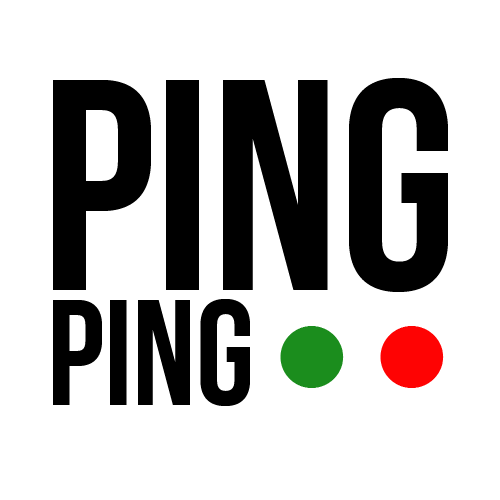
<style>
.page{position:relative;width:500px;height:500px;background:#ffffff}
.page>*{position:absolute;margin:0}
.t1{font:300px "BebasNeue";color:#000000}
.t2{font:150px "BebasNeue";color:#000000}
</style>
<div class="page">
<p class="t1" style="left:53px;top:78px;width:395px;height:214px">PING</p>
<p class="t2" style="left:53px;top:299px;width:197px;height:107px">PING</p>
</div>
